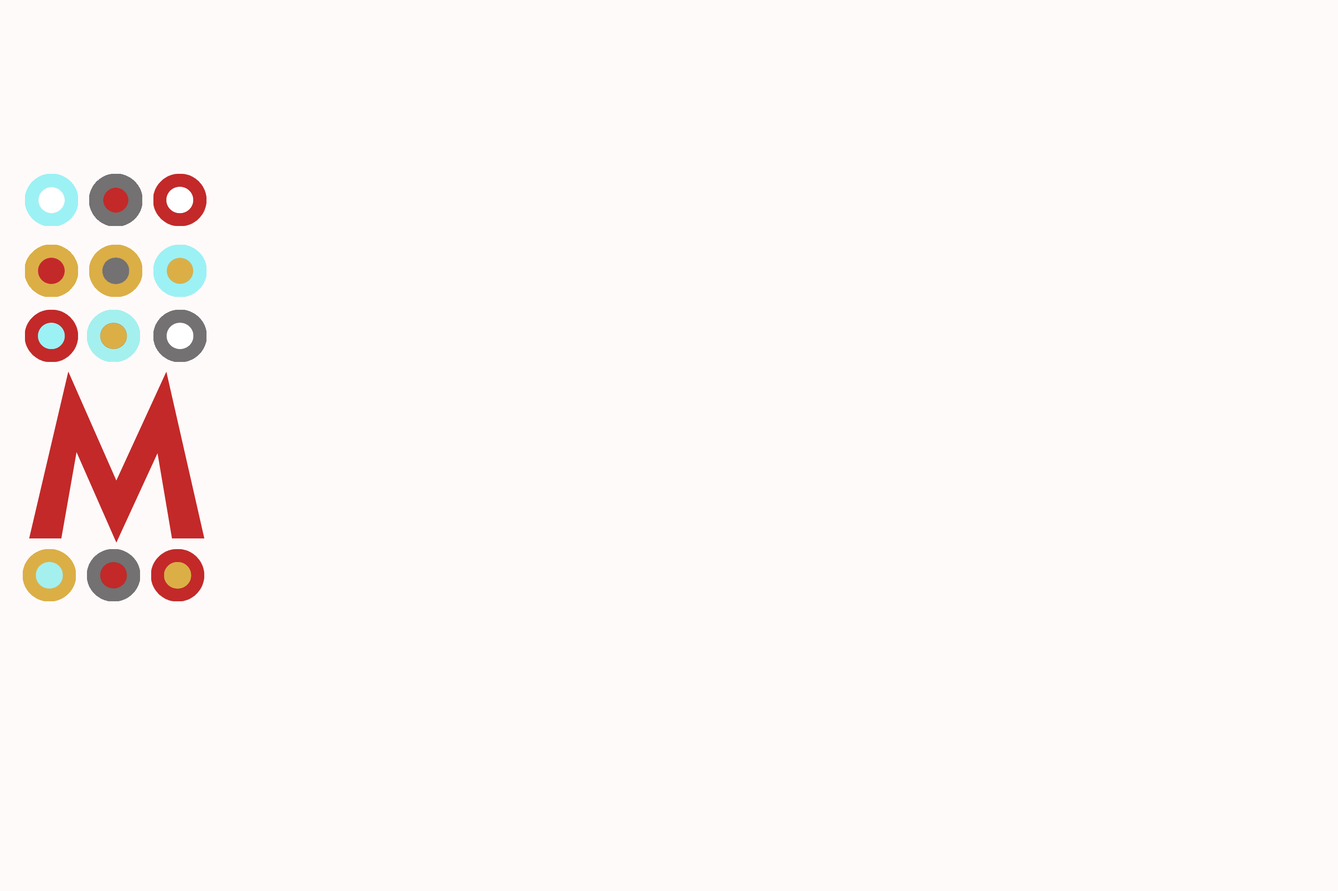
<style>
.page{position:relative;width:1338px;height:891px;background:#fffafa}
.page>*{position:absolute;margin:0}
.t1{font:211.1px "Moderna";color:#c32929;scale:0.9 1}
</style>
<div class="page">
<p class="t1" style="left:29px;top:372px;width:175px;height:171px">M</p>
</div>
